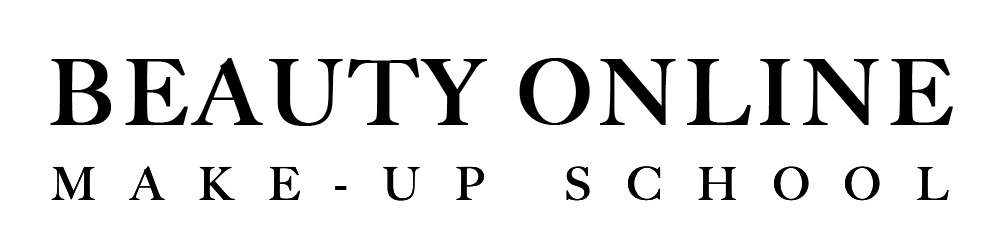
<style>
.page{position:relative;width:1000px;height:250px;background:#ffffff}
.page>*{position:absolute;margin:0}
.t1{font:90.3px "BigCaslon-Medium";letter-spacing:0.06em;color:#000000;text-transform:uppercase;font-weight:bold}
.t2{font:45.1px "BigCaslon-Medium";letter-spacing:0.78em;color:#000000;text-transform:uppercase}
</style>
<div class="page">
<p class="t1" style="left:50px;top:58px;width:903px;height:68px">Beauty Online</p>
<p class="t2" style="left:51px;top:166px;width:898px;height:35px">Make-Up School</p>
</div>
